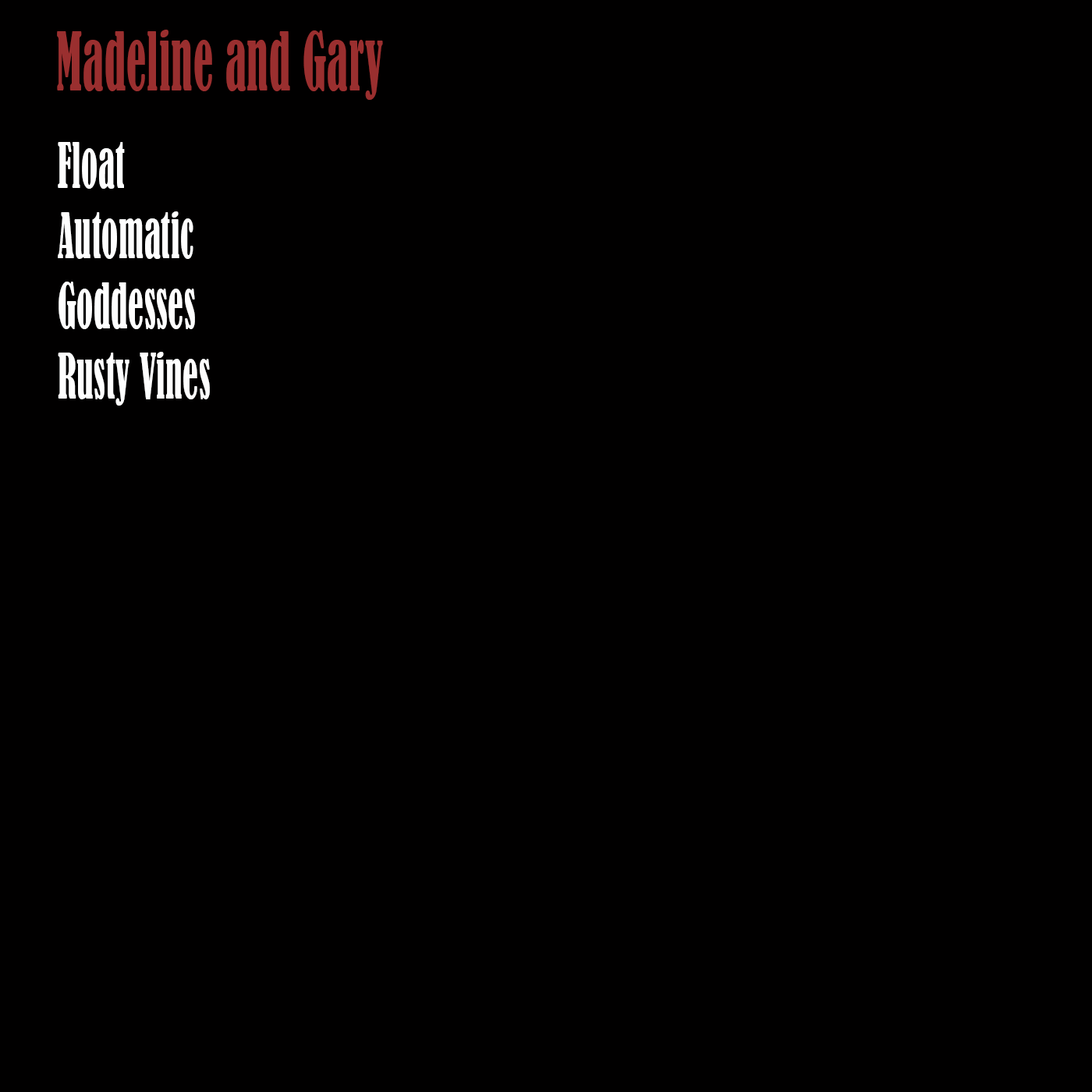
<style>
.page{position:relative;width:1092px;height:1092px;background:#010000}
.page>*{position:absolute;margin:0}
.t1{font:74.9px "BernardMT-Condensed";letter-spacing:0.02em;color:#9a2f2f;scale:0.58 1}
.t2{font:58.5px "BernardMT-Condensed";letter-spacing:0.02em;color:#fefefe;scale:0.58 1}
</style>
<div class="page">
<p class="t1" style="left:57px;top:30px;width:326px;height:70px">Madeline and Gary</p>
<p class="t2" style="left:58px;top:142px;width:152px;height:264px">Float<br>Automatic<br>Goddesses<br>Rusty Vines</p>
</div>
